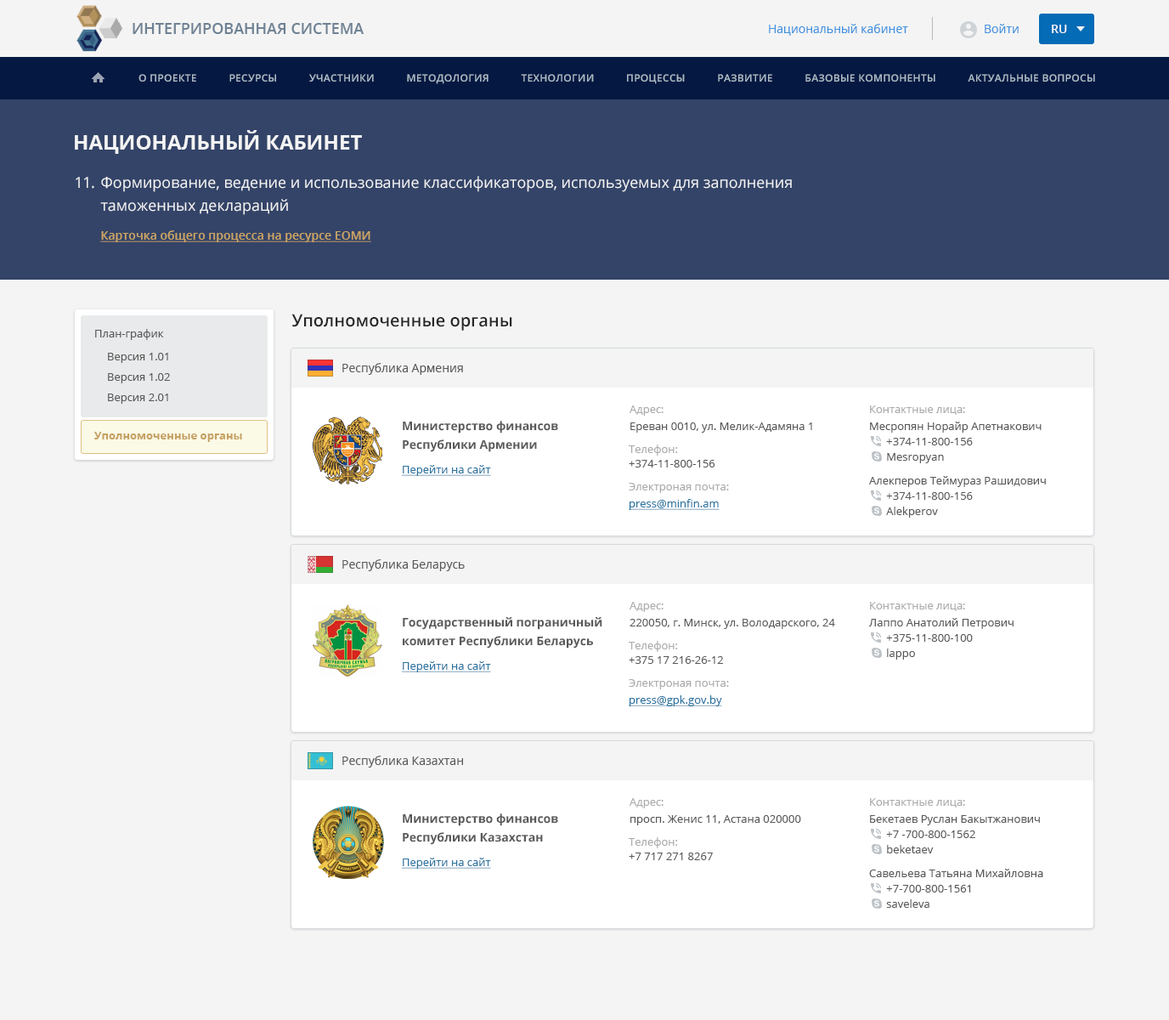
<style>
.page{position:relative;width:1169px;height:1020px;background:#f4f4f4}
.page>*{position:absolute;margin:0}
.t1{font:15.3px "OpenSans-Semibold";color:#6f8294;text-transform:uppercase}
.t2{font:11.9px "OpenSans";color:#4292df}
.t3{font:11.9px "OpenSans-Semibold";color:#f4f4f4}
.t4{font:10.2px "OpenSans-Semibold";letter-spacing:0.025em;color:#acbdc7;text-transform:uppercase}
.t5{font:20.4px "OpenSans-Bold";color:#f4f4f4;text-transform:uppercase}
.t6{font:15.3px "OpenSans";letter-spacing:-0.025em;color:#f4f4f4}
.t7{font:15.3px/22.9px "OpenSans";color:#f4f4f4}
.t8{font:11.9px "OpenSans-Semibold";color:#cea663;text-decoration:underline}
.t9{font:17px "OpenSans-Semibold";color:#262626}
.t10{font:11px "OpenSans";color:#595959}
.t11{font:11px/20.4px "OpenSans";color:#595959}
.t12{font:11.9px "OpenSans";color:#595959}
.t13{font:11px "OpenSans";color:#ababab}
.t14{font:11.9px/18.7px "OpenSans-Bold";color:#595959}
.t15{font:11px/15.3px "OpenSans";color:#595959}
.t16{font:11px "OpenSans-Bold";color:#c6a163}
.t17{font:11px "OpenSans";color:#2b74a1;text-decoration:underline}
</style>
<div class="page">
<p class="t1" style="left:133px;top:23px;width:231px;height:11px">Интегрированная система</p>
<p class="t2" style="left:769px;top:24px;width:139px;height:12px">Национальный кабинет</p>
<p class="t2" style="left:985px;top:24px;width:34px;height:9px">Войти</p>
<p class="t3" style="left:1052px;top:25px;width:15px;height:8px">RU</p>
<p class="t4" style="left:139px;top:74px;width:956px;height:10px">О проекте           Ресурсы           Участники           Методология           Технологии           Процессы           Развитие           Базовые компоненты           Актуальные вопросы</p>
<p class="t5" style="left:75px;top:130px;width:287px;height:24px">Национальный кабинет</p>
<p class="t6" style="left:76px;top:177px;width:18px;height:12px">11.</p>
<p class="t7" style="left:100px;top:176px;width:692px;height:39px">Формирование, ведение и использование классификаторов, используемых для заполнения таможенных деклараций</p>
<p class="t8" style="left:100px;top:230px;width:271px;height:12px">Карточка общего процесса на ресурсе ЕОМИ</p>
<p class="t9" style="left:291px;top:314px;width:221px;height:17px">Уполномоченные органы</p>
<p class="t10" style="left:95px;top:329px;width:69px;height:11px">План-график</p>
<p class="t11" style="left:108px;top:353px;width:62px;height:51px">Версия 1.01<br>Версия 1.02<br>Версия 2.01</p>
<p class="t12" style="left:342px;top:363px;width:121px;height:12px">Республика Армения</p>
<p class="t13" style="left:630px;top:405px;width:34px;height:11px">Адрес:</p>
<p class="t13" style="left:870px;top:405px;width:95px;height:10px">Контактные лица:</p>
<p class="t14" style="left:403px;top:421px;width:155px;height:31px">Министерство финансов Республики Армении</p>
<p class="t10" style="left:631px;top:422px;width:181px;height:11px">Ереван 0010, ул. Мелик-Адамяна 1</p>
<p class="t15" style="left:869px;top:422px;width:177px;height:96px">Месропян Норайр Апетнакович<br>      +374-11-800-156<br>      Mesropyan<br>Алекперов Теймураз Рашидович<br>      +374-11-800-156<br>      Alekperov</p>
<p class="t16" style="left:94px;top:432px;width:148px;height:10px">Уполномоченные органы</p>
<p class="t13" style="left:629px;top:444px;width:49px;height:11px">Телефон:</p>
<p class="t10" style="left:629px;top:460px;width:87px;height:7px">+374-11-800-156</p>
<p class="t17" style="left:402px;top:465px;width:89px;height:11px">Перейти на сайт</p>
<p class="t13" style="left:629px;top:483px;width:100px;height:10px">Электроная почта:</p>
<p class="t17" style="left:629px;top:499px;width:91px;height:11px">press@minfin.am</p>
<p class="t12" style="left:342px;top:559px;width:123px;height:12px">Республика Беларусь</p>
<p class="t13" style="left:630px;top:602px;width:34px;height:10px">Адрес:</p>
<p class="t13" style="left:870px;top:602px;width:95px;height:9px">Контактные лица:</p>
<p class="t14" style="left:403px;top:617px;width:200px;height:31px">Государственный пограничный комитет Республики Беларусь</p>
<p class="t15" style="left:869px;top:618px;width:145px;height:41px">Лаппо Анатолий Петрович<br>      +375-11-800-100<br>      lappo<br>Алекперов Теймураз Рашидович<br>      +374-11-800-156<br>      Alekperov</p>
<p class="t10" style="left:630px;top:619px;width:205px;height:10px">220050, г. Минск, ул. Володарского, 24</p>
<p class="t13" style="left:629px;top:641px;width:49px;height:11px">Телефон:</p>
<p class="t17" style="left:402px;top:661px;width:89px;height:11px">Перейти на сайт</p>
<p class="t10" style="left:629px;top:656px;width:95px;height:8px">+375 17 216-26-12</p>
<p class="t13" style="left:629px;top:679px;width:100px;height:10px">Электроная почта:</p>
<p class="t17" style="left:629px;top:695px;width:93px;height:11px">press@gpk.gov.by</p>
<p class="t12" style="left:342px;top:755px;width:121px;height:12px">Республика Казахтан</p>
<p class="t13" style="left:630px;top:798px;width:34px;height:10px">Адрес:</p>
<p class="t13" style="left:870px;top:798px;width:95px;height:9px">Контактные лица:</p>
<p class="t14" style="left:403px;top:813px;width:155px;height:32px">Министерство финансов Республики Казахстан</p>
<p class="t10" style="left:631px;top:815px;width:170px;height:10px">просп. Женис 11, Астана 020000</p>
<p class="t15" style="left:869px;top:815px;width:175px;height:93px">Бекетаев Руслан Бакытжанович <br>      +7 -700-800-1562<br>      beketaev<br>Савельева Татьяна Михайловна<br>      +7-700-800-1561<br>      saveleva</p>
<p class="t13" style="left:629px;top:837px;width:49px;height:11px">Телефон:</p>
<p class="t17" style="left:402px;top:857px;width:89px;height:11px">Перейти на сайт</p>
<p class="t10" style="left:629px;top:852px;width:84px;height:8px">+7 717 271 8267</p>
</div>
